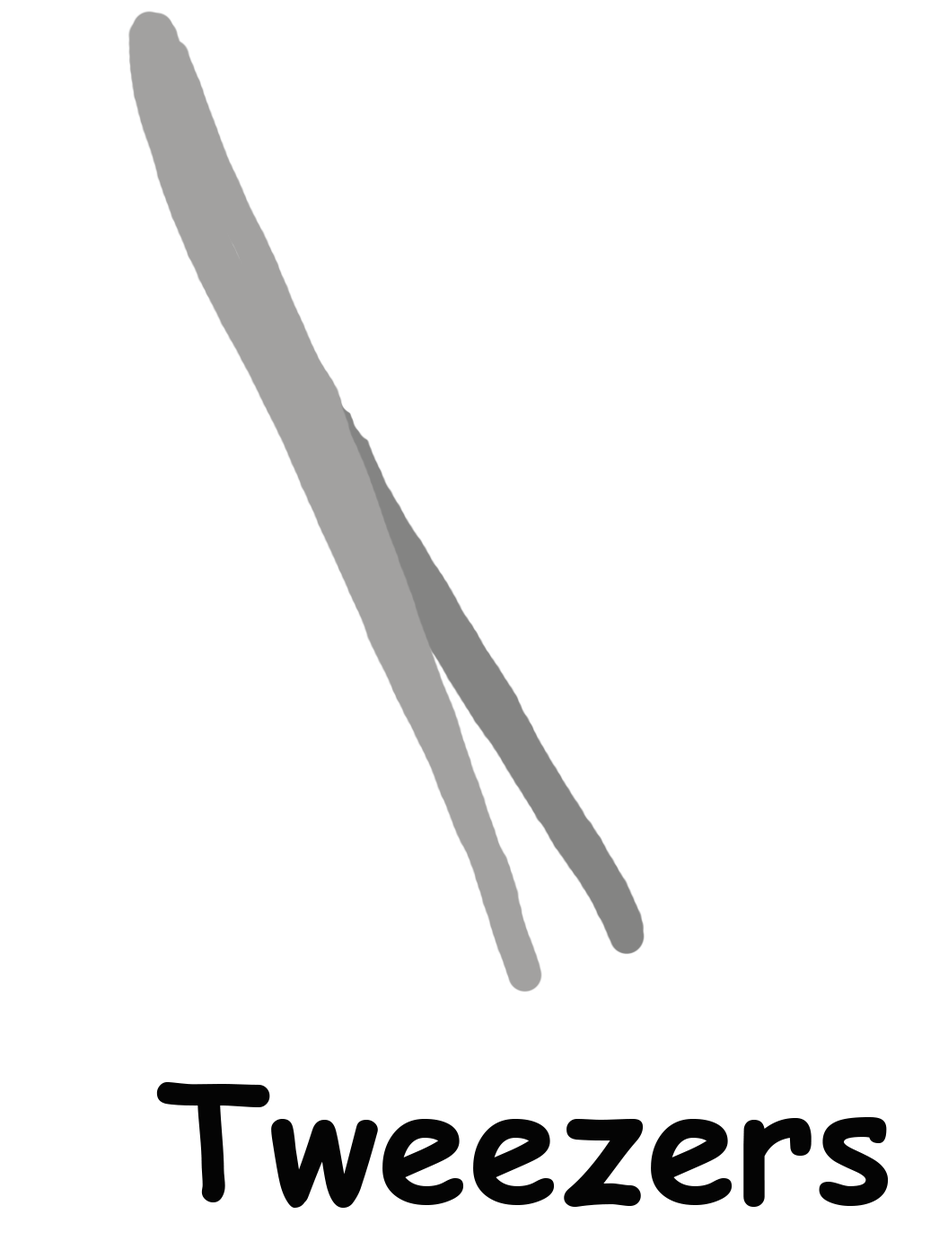
<style>
.page{position:relative;width:948px;height:1258px;background:#ffffff}
.page>*{position:absolute;margin:0}
.t1{font:161.5px "ComicSansMS-Bold";color:#040404}
</style>
<div class="page">
<p class="t1" style="left:156px;top:1081px;width:732px;height:127px">Tweezers</p>
</div>
